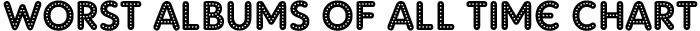
<style>
.page{position:relative;width:700px;height:31px;background:#ffffff}
.page>*{position:absolute;margin:0}
.t1{font:41.7px "AdamGorry-Lights";color:#000000}
</style>
<div class="page">
<p class="t1" style="left:3px;top:0px;width:695px;height:31px">Worst albums of all time chart</p>
</div>
